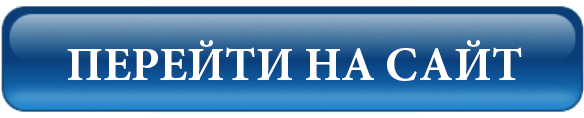
<style>
.page{position:relative;width:584px;height:118px}
.page>*{position:absolute;margin:0}
.t1{font:48px "MinionPro-Bold";color:#ffffff}
</style>
<div class="page">
<p class="t1" style="left:67px;top:40px;width:455px;height:41px">ПЕРЕЙТИ НА САЙТ</p>
</div>
